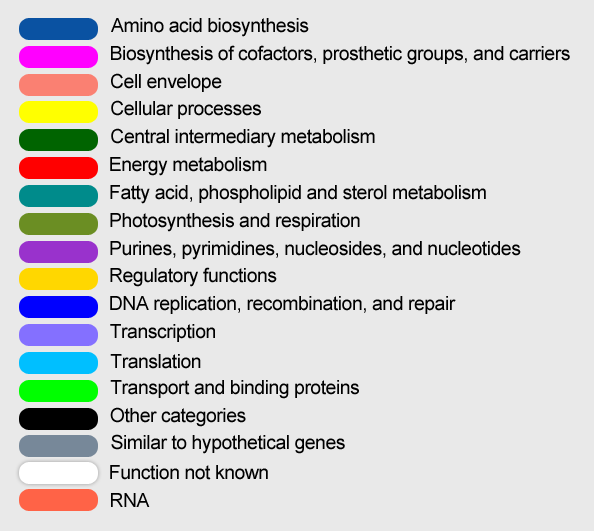
<style>
.page{position:relative;width:594px;height:531px;background:#e9e9e9}
.page>*{position:absolute;margin:0}
.t1{font:19.4px "ArialMT";letter-spacing:-0.025em;color:#000000}
</style>
<div class="page">
<p class="t1" style="left:111px;top:18px;width:198px;height:19px">Amino acid biosynthesis</p>
<p class="t1" style="left:111px;top:45px;width:459px;height:20px">Biosynthesis of cofactors, prosthetic groups, and carriers</p>
<p class="t1" style="left:111px;top:73px;width:111px;height:19px">Cell envelope</p>
<p class="t1" style="left:111px;top:100px;width:150px;height:19px">Cellular processes</p>
<p class="t1" style="left:111px;top:128px;width:264px;height:20px">Central intermediary metabolism</p>
<p class="t1" style="left:110px;top:157px;width:157px;height:19px">Energy metabolism</p>
<p class="t1" style="left:110px;top:185px;width:376px;height:19px">Fatty acid, phospholipid and sterol metabolism</p>
<p class="t1" style="left:110px;top:213px;width:250px;height:19px">Photosynthesis and respiration</p>
<p class="t1" style="left:110px;top:241px;width:411px;height:19px">Purines, pyrimidines, nucleosides, and nucleotides</p>
<p class="t1" style="left:110px;top:267px;width:167px;height:20px">Regulatory functions</p>
<p class="t1" style="left:110px;top:296px;width:346px;height:18px">DNA replication, recombination, and repair</p>
<p class="t1" style="left:110px;top:324px;width:105px;height:18px">Transcription</p>
<p class="t1" style="left:110px;top:354px;width:91px;height:15px">Translation</p>
<p class="t1" style="left:110px;top:380px;width:249px;height:19px">Transport and binding proteins</p>
<p class="t1" style="left:110px;top:407px;width:136px;height:20px">Other categories</p>
<p class="t1" style="left:111px;top:434px;width:234px;height:20px">Similar to hypothetical genes</p>
<p class="t1" style="left:110px;top:465px;width:158px;height:15px">Function not known</p>
<p class="t1" style="left:111px;top:493px;width:39px;height:14px">RNA</p>
</div>
